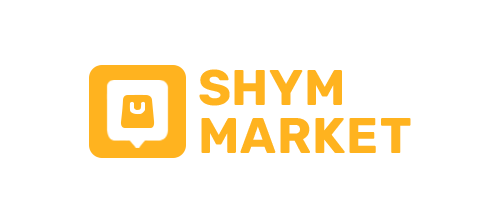
<style>
.page{position:relative;width:500px;height:212px;background:#ffffff}
.page>*{position:absolute;margin:0}
.t1{font:50px/48px "Rubik-Bold";letter-spacing:0.025em;color:#ffb31f}
</style>
<div class="page">
<p class="t1" style="left:199px;top:69px;width:212px;height:84px">SHYM<br>MARKET</p>
</div>
